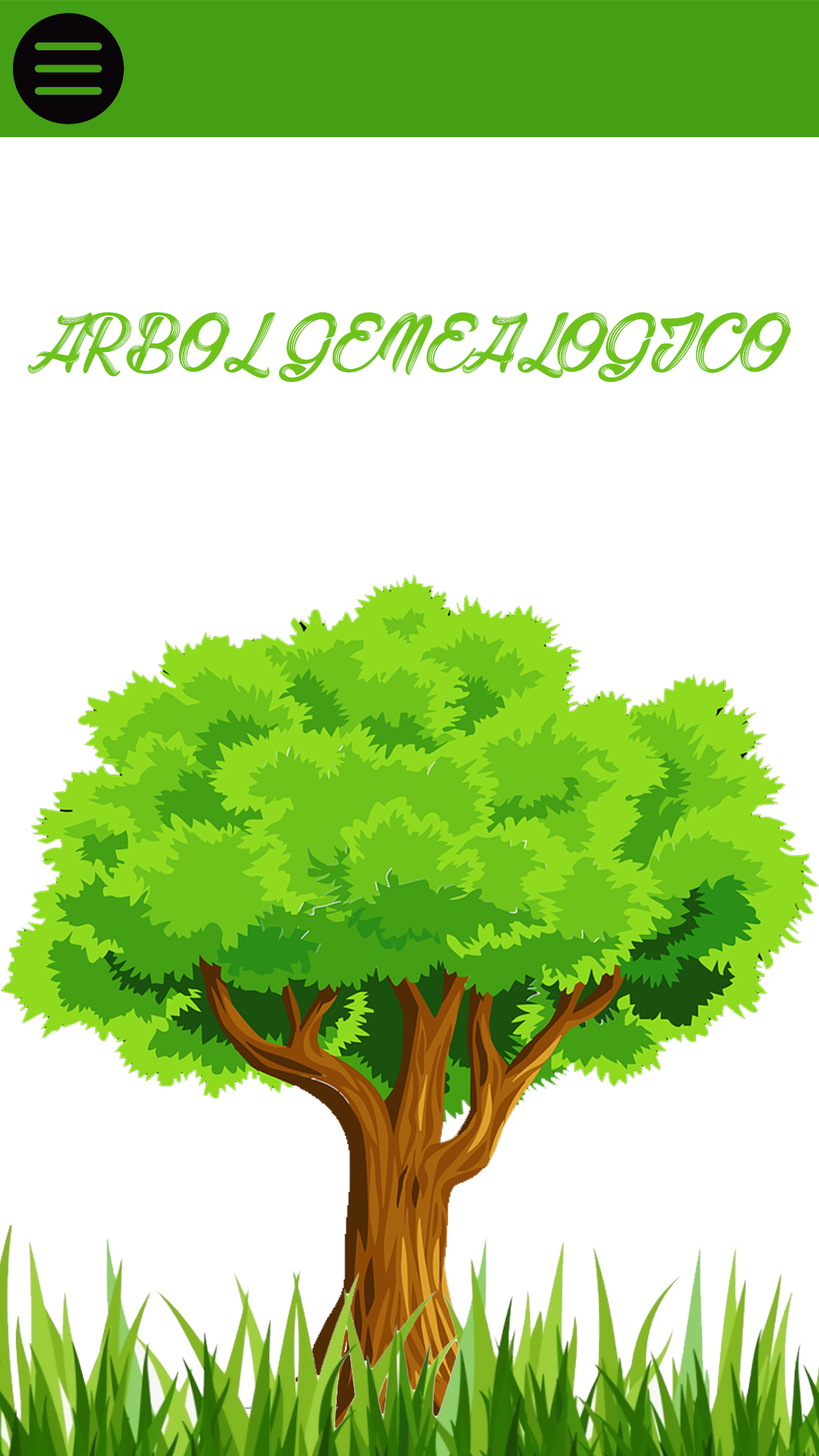
<style>
.page{position:relative;width:819px;height:1456px;background:#ffffff}
.page>*{position:absolute;margin:0}
.t1{font:71.6px "BarberStreetPersonalUseOnly";color:#6ec21a}
</style>
<div class="page">
<p class="t1" style="left:27px;top:312px;width:764px;height:70px">ARBOL GENEALOGICO</p>
</div>
